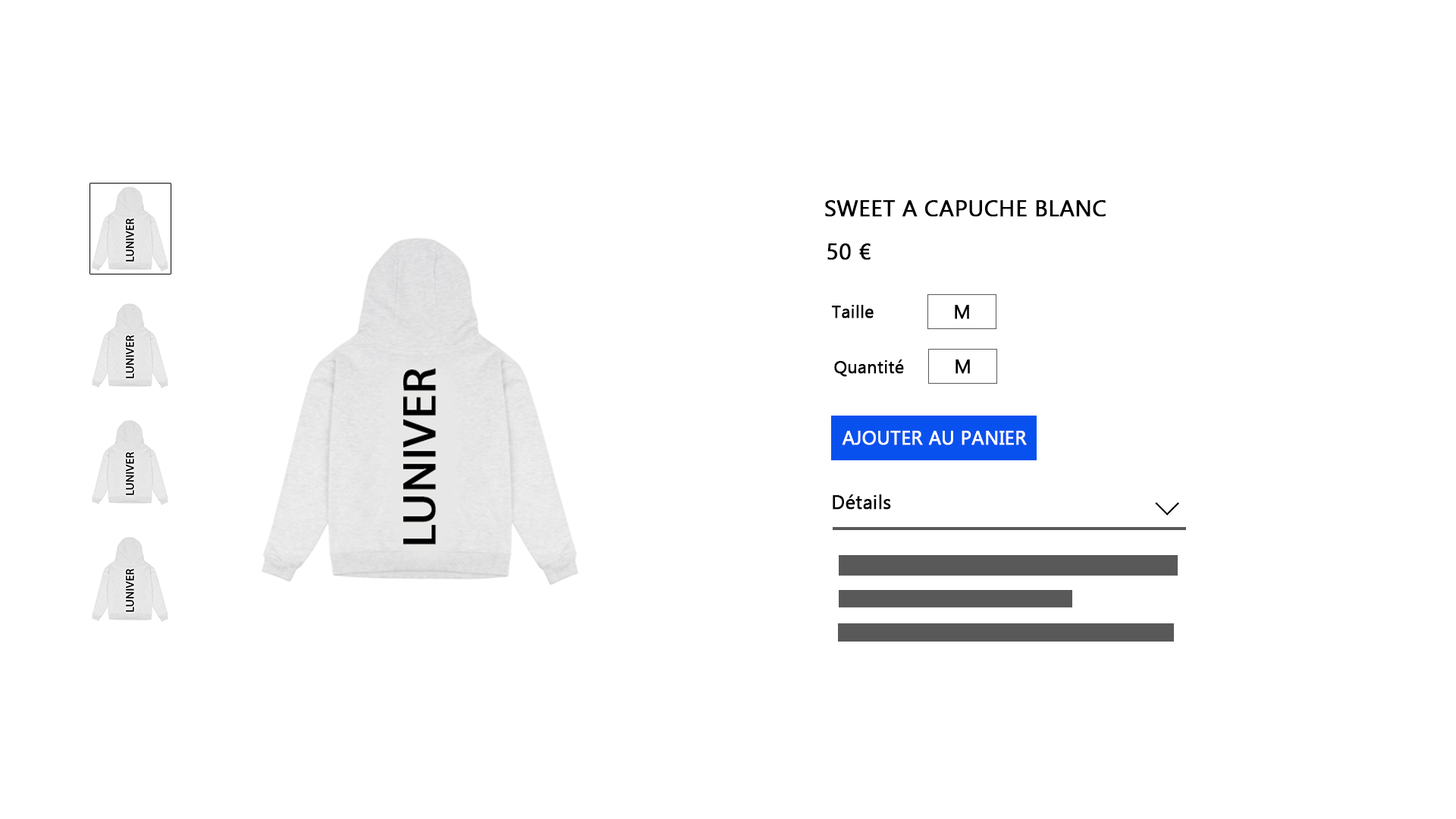
<style>
.page{position:relative;width:1456px;height:819px;background:#ffffff}
.page>*{position:absolute;margin:0}
.t1{font:22.7px "Gadugi";color:#000000;font-weight:bold}
.t2{font:17.4px "Gadugi";color:#000000;font-weight:bold}
.t3{font:19px "Gadugi";color:#000000;font-weight:bold}
.t4{font:19px "Gadugi";color:#ffffff;font-weight:bold}
</style>
<div class="page">
<p class="t1" style="left:825px;top:200px;width:281px;height:17px">SWEET A CAPUCHE BLANC</p>
<p class="t1" style="left:827px;top:243px;width:44px;height:17px">50 €</p>
<p class="t2" style="left:832px;top:305px;width:42px;height:13px">Taille</p>
<p class="t3" style="left:955px;top:305px;width:14px;height:14px">M</p>
<p class="t2" style="left:834px;top:359px;width:70px;height:18px">Quantité</p>
<p class="t3" style="left:955px;top:359px;width:15px;height:15px">M</p>
<p class="t4" style="left:842px;top:431px;width:185px;height:14px">AJOUTER AU PANIER</p>
<p class="t3" style="left:833px;top:494px;width:58px;height:16px">Détails</p>
</div>
